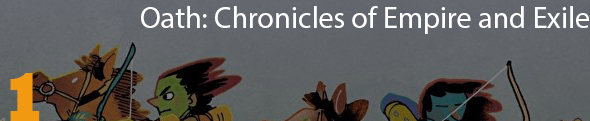
<style>
.page{position:relative;width:590px;height:121px}
.page>*{position:absolute;margin:0}
.t1{font:30px "MyriadPro-Regular";color:#ffffff}
.t2{font:70px "Rockwell-ExtraBold";color:#f09911}
</style>
<div class="page">
<p class="t1" style="left:141px;top:6px;width:448px;height:28px">Oath: Chronicles of Empire and Exile</p>
<p class="t2" style="left:10px;top:73px;width:30px;height:49px">1</p>
</div>
